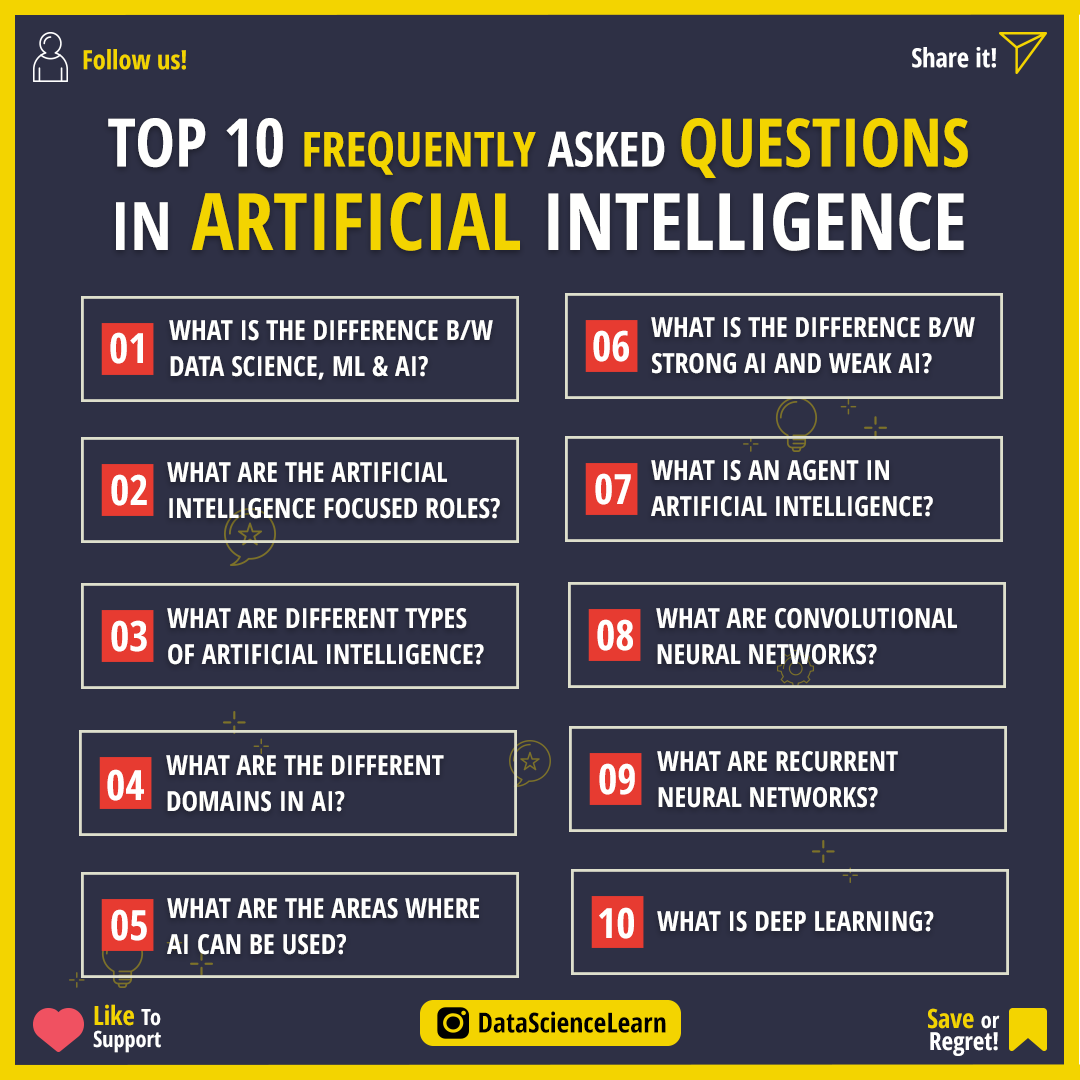
<style>
.page{position:relative;width:1080px;height:1080px;background:#2e3045}
.page>*{position:absolute;margin:0}
.t1{font:26.4px "OpenSans-CondensedBold";color:#f3d400}
.t2{font:26.4px "OpenSans-CondensedBold";color:#ffffff}
.t3{font:79.2px/83.3px "OpenSans-CondensedBold";color:#fffffe}
.t4{font:66.7px/83.3px "OpenSans-CondensedBold";color:#fffffe}
.t5{font:48.6px/83.3px "OpenSans-CondensedBold";color:#f3d400}
.t6{font:48.6px/83.3px "OpenSans-CondensedBold";color:#fffffe}
.t7{font:66.7px/83.3px "OpenSans-CondensedBold";color:#f3d400}
.t8{font:79.2px/83.3px "OpenSans-CondensedBold";color:#f3d400}
.t9{font:27.8px/36.1px "OpenSans-CondensedBold";color:#fffffe}
.t10{font:41.7px "OpenSans-CondensedBold";color:#fffffe}
.t11{font:27.8px "OpenSans-CondensedBold";color:#fffffe}
.t12{font:22.2px/22.2px "OpenSans-CondensedBold";color:#ffffff}
.t13{font:26.4px/22.2px "OpenSans-CondensedBold";color:#f3d400}
.t14{font:27.8px "OpenSans-CondensedBold";color:#000000}
.t15{font:25px/22.2px "OpenSans-CondensedBold";color:#ffffff}
</style>
<div class="page">
<p class="t1" style="left:83px;top:49px;width:103px;height:21px">Follow us!</p>
<p class="t2" style="left:912px;top:47px;width:84px;height:21px">Share it!</p>
<p class="t3" style="left:108px;top:118px;width:860px;height:133px;text-align:center"><span class="t4">TOP 10 </span><span class="t5">FREQUENTLY </span><span class="t6">ASKED </span><span class="t7">QUESTIONS<br></span><span class="t4">IN </span><span class="t8">ARTIFICIAL </span>INTELLIGENCE</p>
<p class="t9" style="left:651px;top:317px;width:324px;height:57px">WHAT IS THE DIFFERENCE B/W<br>STRONG AI AND WEAK AI?</p>
<p class="t9" style="left:169px;top:320px;width:324px;height:60px">WHAT IS THE DIFFERENCE B/W <br>DATA SCIENCE, ML &amp; AI?</p>
<p class="t10" style="left:110px;top:332px;width:33px;height:32px">01</p>
<p class="t10" style="left:593px;top:330px;width:36px;height:32px">06</p>
<p class="t9" style="left:167px;top:462px;width:333px;height:57px">WHAT ARE THE ARTIFICIAL <br>INTELLIGENCE FOCUSED ROLES?</p>
<p class="t9" style="left:651px;top:460px;width:282px;height:57px">WHAT IS AN AGENT IN <br>ARTIFICIAL INTELLIGENCE?</p>
<p class="t10" style="left:595px;top:473px;width:36px;height:32px">07</p>
<p class="t10" style="left:111px;top:474px;width:36px;height:32px">02</p>
<p class="t9" style="left:167px;top:608px;width:317px;height:57px">WHAT ARE DIFFERENT TYPES <br>OF ARTIFICIAL INTELLIGENCE?</p>
<p class="t9" style="left:656px;top:608px;width:301px;height:57px">WHAT ARE CONVOLUTIONAL <br>NEURAL NETWORKS?</p>
<p class="t10" style="left:111px;top:620px;width:36px;height:32px">03</p>
<p class="t10" style="left:597px;top:619px;width:36px;height:32px">08</p>
<p class="t9" style="left:166px;top:755px;width:278px;height:57px">WHAT ARE THE DIFFERENT <br>DOMAINS IN AI?</p>
<p class="t9" style="left:657px;top:751px;width:241px;height:57px">WHAT ARE RECURRENT <br>NEURAL NETWORKS?</p>
<p class="t10" style="left:107px;top:769px;width:37px;height:32px">04</p>
<p class="t10" style="left:599px;top:763px;width:36px;height:32px">09</p>
<p class="t9" style="left:167px;top:898px;width:312px;height:57px">WHAT ARE THE AREAS WHERE <br>AI CAN BE USED?</p>
<p class="t10" style="left:111px;top:909px;width:36px;height:32px">05</p>
<p class="t10" style="left:599px;top:907px;width:35px;height:32px">10</p>
<p class="t11" style="left:657px;top:911px;width:277px;height:21px">WHAT IS DEEP LEARNING?</p>
<p class="t12" style="left:93px;top:1004px;width:68px;height:49px"><span class="t13">Like </span>To<br>Support</p>
<p class="t14" style="left:479px;top:1011px;width:187px;height:22px">DataScienceLearn</p>
<p class="t15" style="left:928px;top:1008px;width:72px;height:48px;text-align:right"><span class="t13">Save </span><span class="t12">or<br></span>Regret!</p>
</div>
